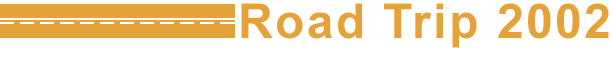
<style>
.page{position:relative;width:610px;height:60px;background:#ffffff}
.page>*{position:absolute;margin:0}
.t1{font:48px "Arial-BoldMT";letter-spacing:0.05em;color:#e5a239}
</style>
<div class="page">
<p class="t1" style="left:241px;top:3px;width:368px;height:45px">Road Trip 2002</p>
</div>
